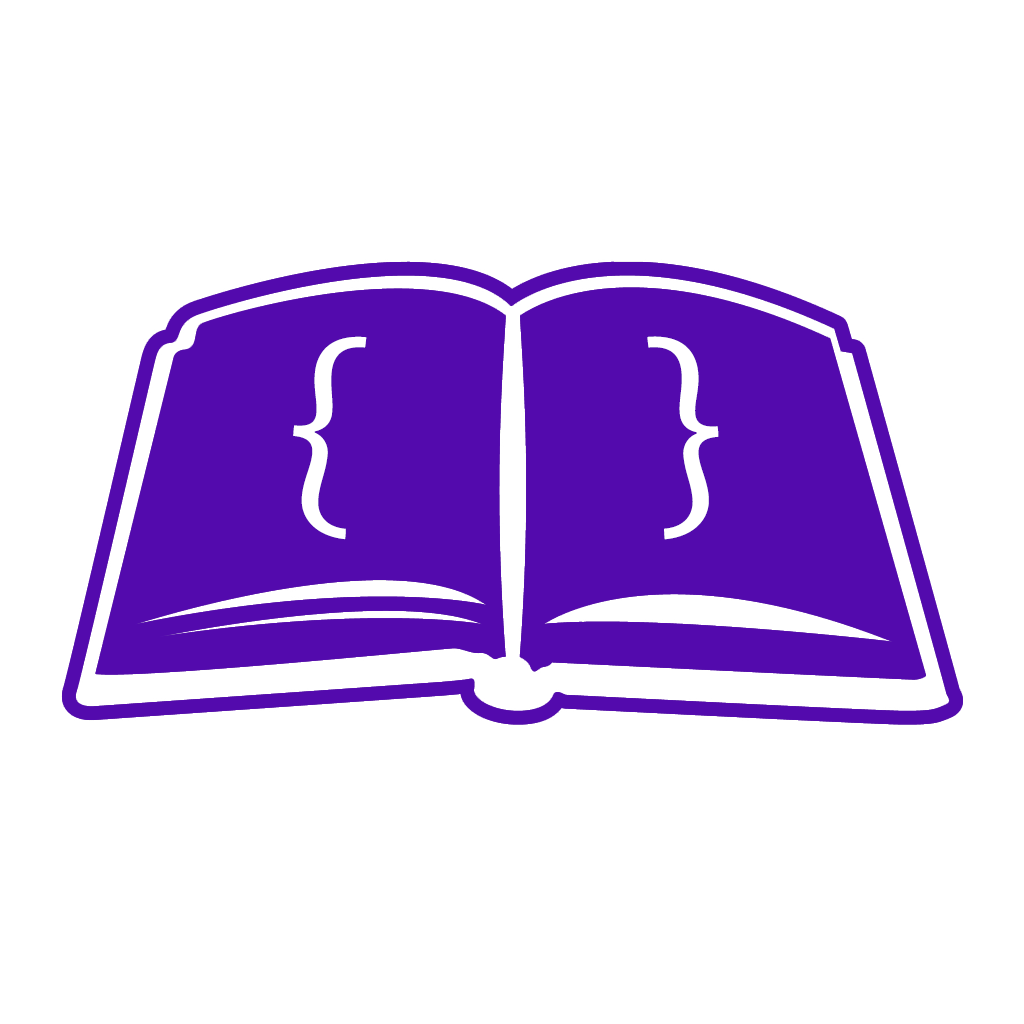
<style>
.page{position:relative;width:1024px;height:1024px;background:#ffffff}
.page>*{position:absolute;margin:0}
.t1{font:240px "ChaparralPro-Regular";color:#ffffff}
</style>
<div class="page">
<p class="t1" style="left:293px;top:336px;width:74px;height:204px;rotate:6deg">{</p>
<p class="t1" style="left:647px;top:336px;width:72px;height:204px;rotate:-5deg">}</p>
</div>
